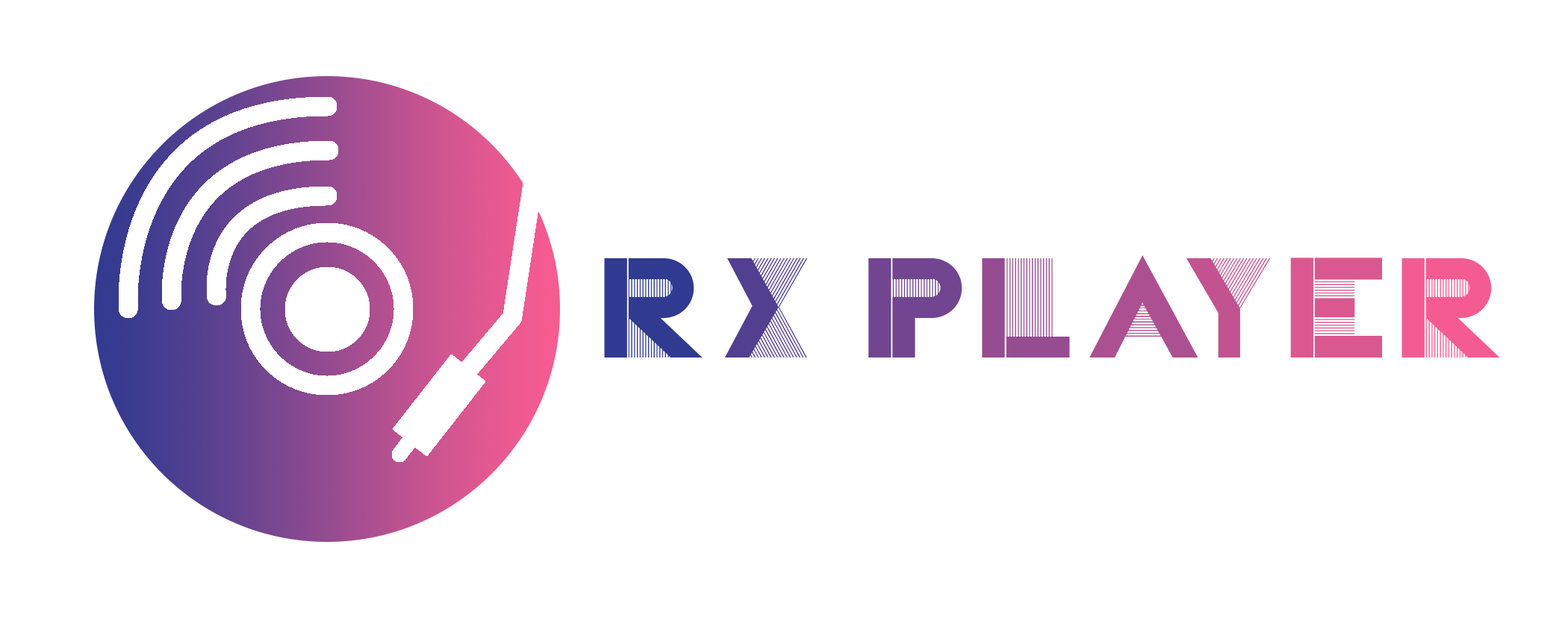
<style>
.page{position:relative;width:1568px;height:618px;background:#ffffff}
.page>*{position:absolute;margin:0}
.t1{font:124.4px "CassandraTwo";letter-spacing:0.1em;color:#303a90}
.t2{font:124.4px "CassandraTwo";letter-spacing:0.1em;color:#523f90}
.t3{font:124.4px "CassandraTwo";letter-spacing:0.1em;color:#714590}
.t4{font:124.4px "CassandraTwo";letter-spacing:0.1em;color:#954c91}
.t5{font:124.4px "CassandraTwo";letter-spacing:0.1em;color:#ad5091}
.t6{font:124.4px "CassandraTwo";letter-spacing:0.1em;color:#c25390}
.t7{font:124.4px "CassandraTwo";letter-spacing:0.1em;color:#db5790}
.t8{font:124.4px "CassandraTwo";letter-spacing:0.1em;color:#f45c91}
</style>
<div class="page">
<p class="t1" style="left:604px;top:255px;width:896px;height:103px">R<span class="t2">X </span><span class="t3">P</span><span class="t4">L</span><span class="t5">A</span><span class="t6">Y</span><span class="t7">E</span><span class="t8">R</span></p>
</div>
